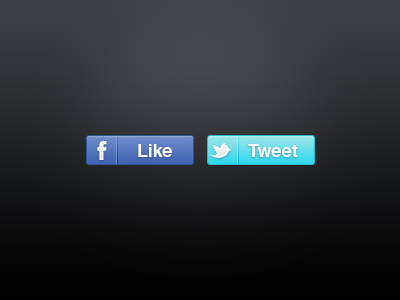
<style>
.page{position:relative;width:400px;height:300px}
.page>*{position:absolute;margin:0}
.t1{font:18px "Helvetica-Bold";color:#eceff1}
.t2{font:18px "Helvetica-Bold";color:#f4f8fa}
</style>
<div class="page">
<p class="t1" style="left:138px;top:144px;width:34px;height:13px">Like</p>
<p class="t2" style="left:248px;top:144px;width:50px;height:13px">Tweet</p>
</div>
